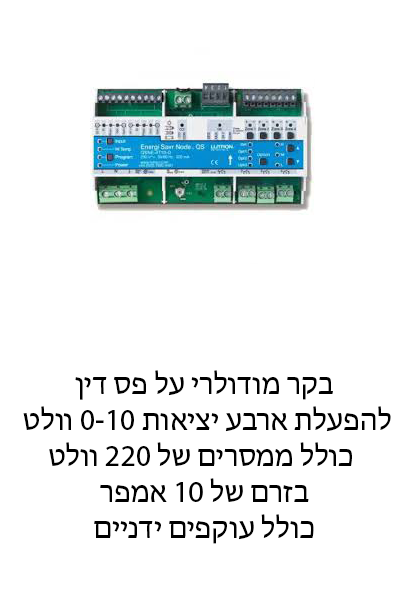
<style>
.page{position:relative;width:400px;height:600px;background:#ffffff}
.page>*{position:absolute;margin:0}
.t1{font:30px "MyriadHebrew-Regular";color:#000000}
</style>
<div class="page">
<p class="t1" style="left:23px;top:370px;width:368px;height:174px;text-align:center">בקר מודולרי על פס דין<br> להפעלת ארבע יציאות 0-10 וולט<br>כולל ממסרים של 220 וולט <br>בזרם של 10 אמפר<br>כולל עוקפים ידניים</p>
</div>
